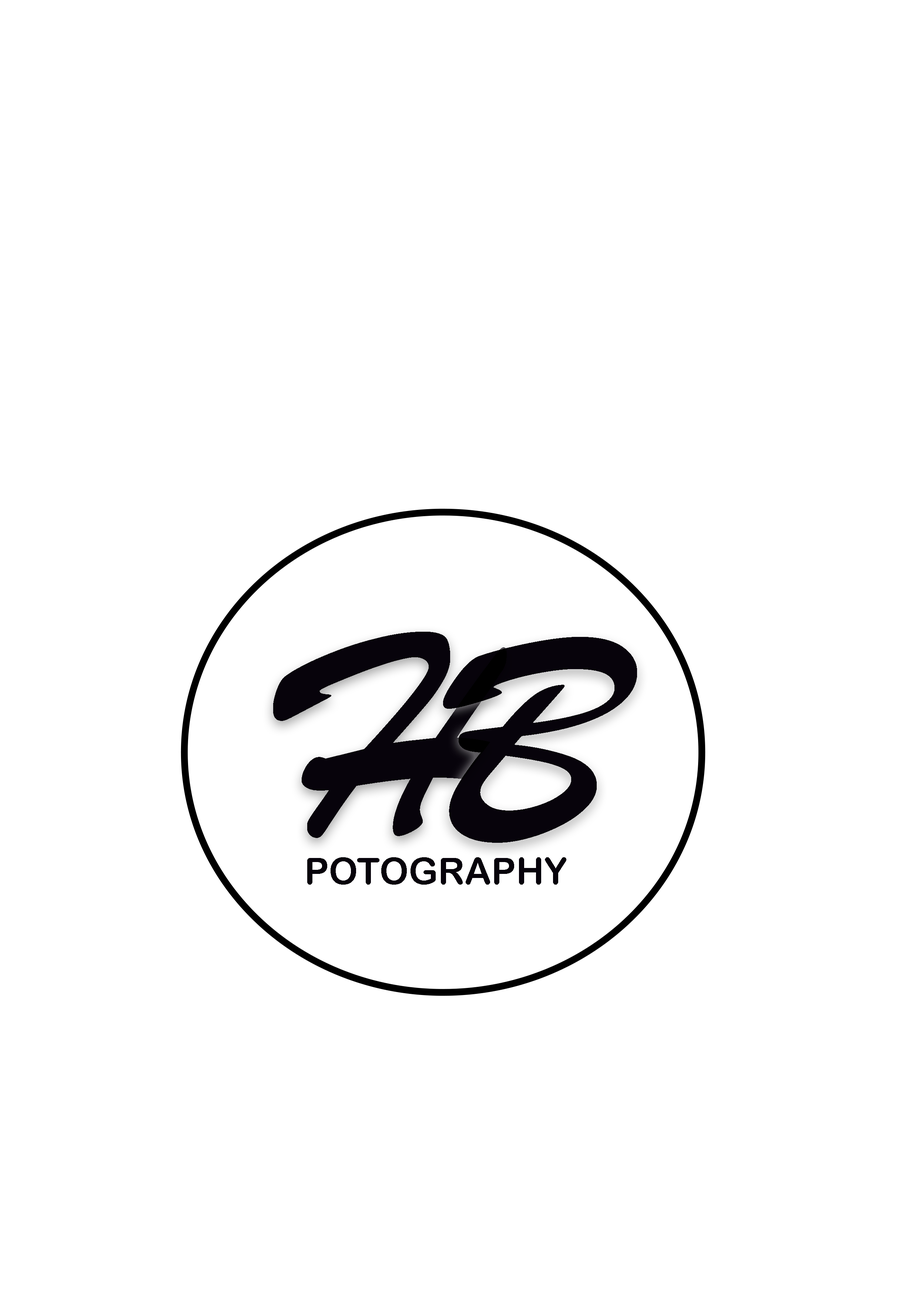
<style>
.page{position:relative;width:918px;height:1299px;background:#ffffff}
.page>*{position:absolute;margin:0}
.t1{font:308.5px "BrushScriptMT";color:#07030b}
.t2{font:37px "ArialRoundedMTBold";color:#07030b}
</style>
<div class="page">
<p class="t1" style="left:273px;top:632px;width:234px;height:206px">H</p>
<p class="t1" style="left:443px;top:637px;width:194px;height:206px">B</p>
<p class="t2" style="left:307px;top:857px;width:259px;height:27px">POTOGRAPHY</p>
</div>
